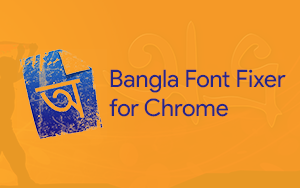
<style>
.page{position:relative;width:300px;height:188px;background:#f59927}
.page>*{position:absolute;margin:0}
.t1{font:24px "ProductSans-Regular";color:#262689}
</style>
<div class="page">
<p class="t1" style="left:109px;top:69px;width:177px;height:48px">Bangla Font Fixer<br>for Chrome</p>
</div>
